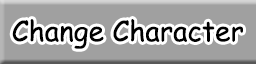
<style>
.page{position:relative;width:256px;height:64px;background:#a0a0a0}
.page>*{position:absolute;margin:0}
.t1{font:28px "ComicSansMS";color:#000000}
</style>
<div class="page">
<p class="t1" style="left:12px;top:19px;width:231px;height:30px">Change Character</p>
</div>
